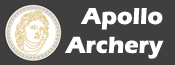
<style>
.page{position:relative;width:175px;height:65px;background:#3f3f3f}
.page>*{position:absolute;margin:0}
.t1{font:24px "ErasITC-Bold";color:#ffffff}
</style>
<div class="page">
<p class="t1" style="left:65px;top:8px;width:99px;height:51px;text-align:right">Apollo<br>Archery</p>
</div>
